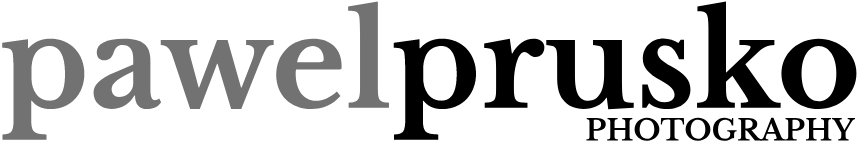
<style>
.page{position:relative;width:860px;height:144px;background:#ffffff}
.page>*{position:absolute;margin:0}
.t1{font:128px "LibreBaskerville-Bold";color:#000000}
.t2{font:128px "LibreBaskerville-Bold";color:#727272}
.t3{font:29px "LibreBaskerville-Bold";color:#000000}
</style>
<div class="page">
<p class="t1" style="left:2px;top:1px;width:855px;height:139px"><span class="t2">pawel</span>prusko</p>
<p class="t3" style="left:586px;top:117px;width:270px;height:24px">PHOTOGRAPHY</p>
</div>
